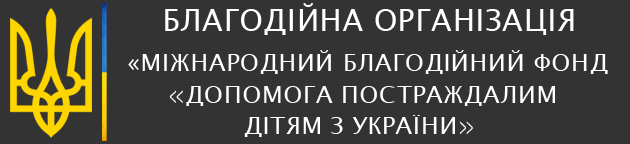
<style>
.page{position:relative;width:630px;height:144px;background:#333333}
.page>*{position:absolute;margin:0}
.t1{font:30px "LucidaSansUnicode";letter-spacing:0.025em;color:#ffffff}
.t2{font:24px "LucidaSansUnicode";letter-spacing:0.025em;color:#ffffff}
.t3{font:24px "HelveticaNowText-Light";letter-spacing:0.025em;color:#ffffff}
</style>
<div class="page">
<p class="t1" style="left:165px;top:3px;width:409px;height:32px">БЛАГОДІЙНА ОРГАНІЗАЦІЯ</p>
<p class="t2" style="left:128px;top:50px;width:480px;height:24px">«МІЖНАРОДНИЙ БЛАГОДІЙНИЙ ФОНД</p>
<p class="t2" style="left:169px;top:86px;width:386px;height:20px"><span class="t3">«</span>ДОПОМОГА ПОСТРАЖДАЛИМ</p>
<p class="t2" style="left:244px;top:115px;width:229px;height:22px">ДІТЯМ З УКРАЇНИ<span class="t3">»</span></p>
</div>
